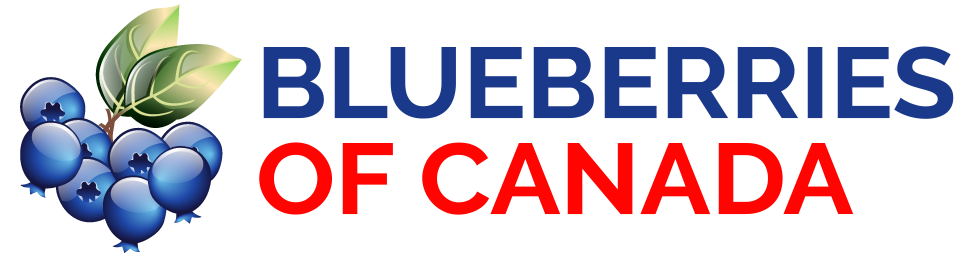
<style>
.page{position:relative;width:972px;height:256px;background:#ffffff}
.page>*{position:absolute;margin:0}
.t1{font:99.8px/48px "Raleway-Bold";color:#1b398a;scale:1.05 1}
.t2{font:99.8px/48px "Raleway-Bold";color:#ff0400;scale:1.05 1}
</style>
<div class="page">
<p class="t1" style="left:259px;top:46px;width:695px;height:169px">BLUEBERRIES<br><br><span class="t2">OF CANADA</span></p>
</div>
